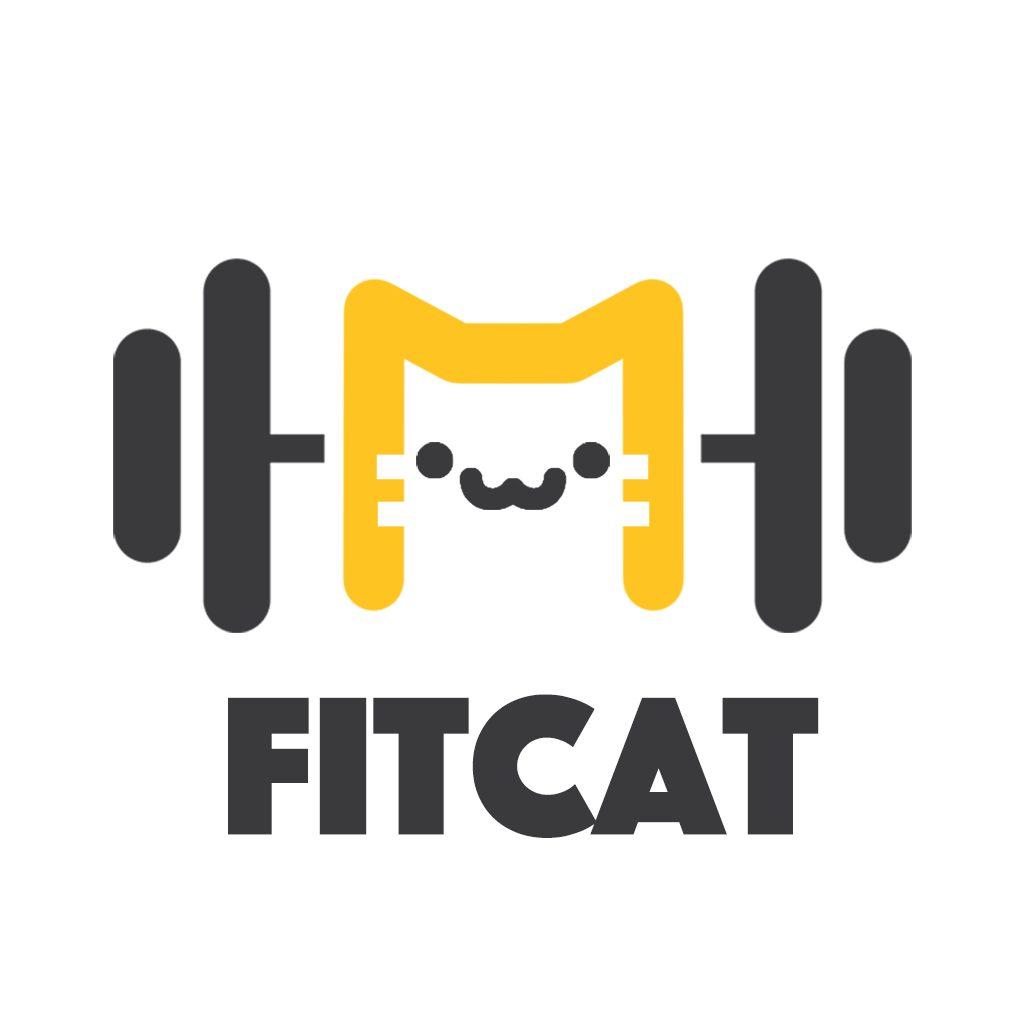
<style>
.page{position:relative;width:1024px;height:1024px;background:#ffffff}
.page>*{position:absolute;margin:0}
.t1{font:204.8px "Phosphate-Solid";color:#3a3a3c}
</style>
<div class="page">
<p class="t1" style="left:228px;top:694px;width:591px;height:144px">FitCat</p>
</div>
